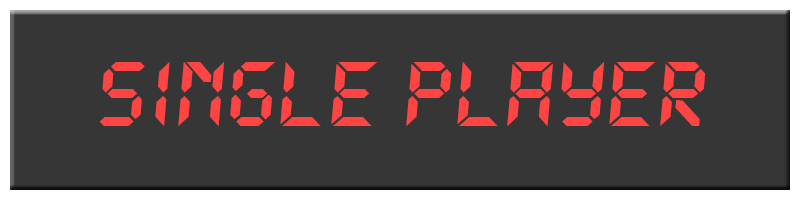
<style>
.page{position:relative;width:800px;height:200px;background:#363636}
.page>*{position:absolute;margin:0}
.t1{font:100px "LetsgoDigital-Regular";color:#ff4444}
</style>
<div class="page">
<p class="t1" style="left:99px;top:62px;width:607px;height:64px">SINGLE PLAYER</p>
</div>
